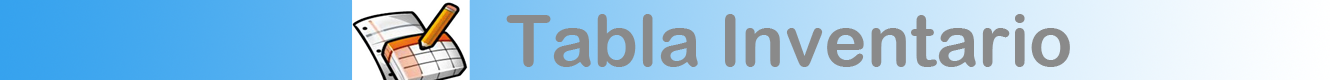
<style>
.page{position:relative;width:1330px;height:80px}
.page>*{position:absolute;margin:0}
.t1{font:72px "ArialRoundedMTBold";color:#8a8a8a}
</style>
<div class="page">
<p class="t1" style="left:506px;top:14px;width:564px;height:53px">Tabla Inventario</p>
</div>
